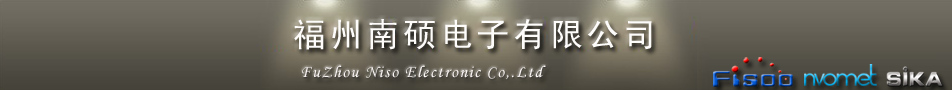
<style>
.page{position:relative;width:952px;height:90px}
.page>*{position:absolute;margin:0}
.t1{font:33.3px "SimHei";letter-spacing:0.1em;color:#fdfcfb}
.t2{font:16.7px "MonotypeCorsiva";letter-spacing:0.1em;color:#fbf6f6}
</style>
<div class="page">
<p class="t1" style="left:294px;top:19px;width:358px;height:31px">福州南硕电子有限公司</p>
<p class="t2" style="left:302px;top:65px;width:244px;height:15px">FuZhou Niso Electronic Co,.Ltd</p>
</div>
